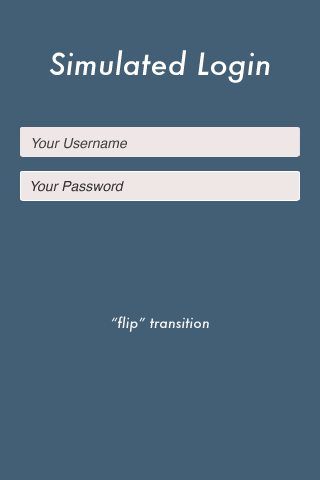
<style>
.page{position:relative;width:320px;height:480px;background:#435f75}
.page>*{position:absolute;margin:0}
.t1{font:30px "Futura-MediumItalic";letter-spacing:0.01em;color:#ffffff}
.t2{font:14px "Helvetica-Oblique";color:#424141}
.t3{font:14px "Helvetica-Oblique";color:#333131}
.t4{font:14px "Futura-MediumItalic";letter-spacing:0.01em;color:#f4f4f4}
</style>
<div class="page">
<p class="t1" style="left:49px;top:50px;width:221px;height:33px">Simulated Login</p>
<p class="t2" style="left:32px;top:138px;width:95px;height:11px">Your Username</p>
<p class="t3" style="left:31px;top:181px;width:93px;height:11px">Your Password</p>
<p class="t4" style="left:111px;top:316px;width:98px;height:16px">“flip” transition</p>
</div>
